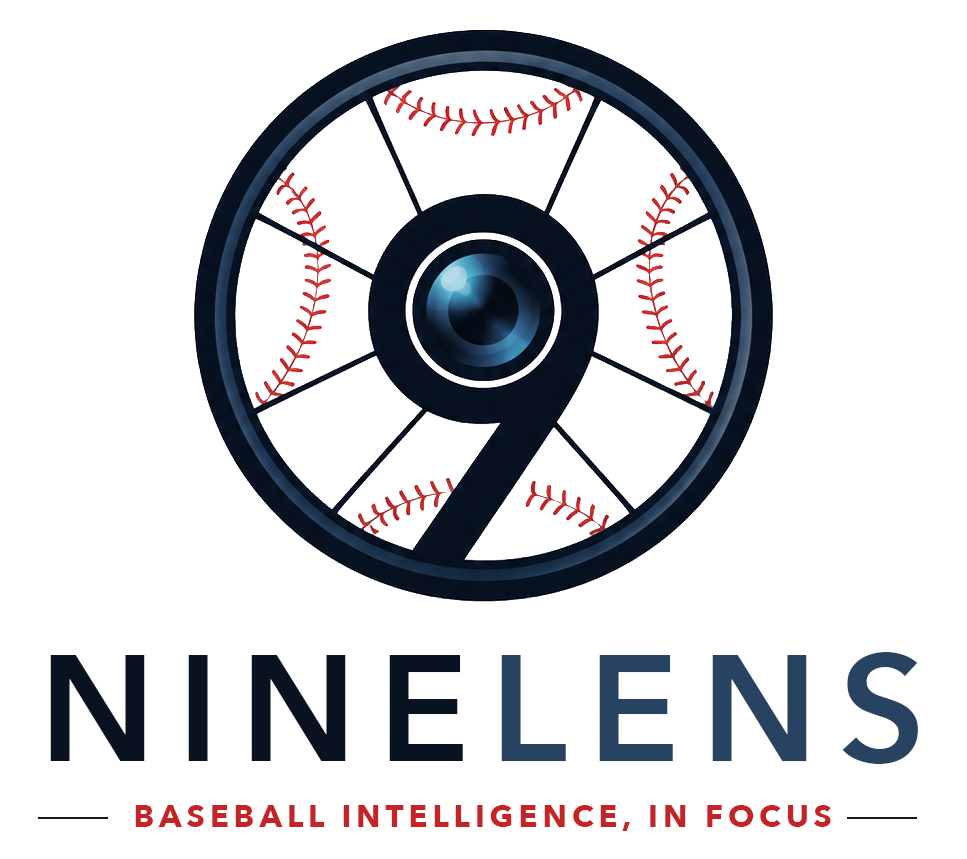
<style>
.page{position:relative;width:967px;height:859px;background:#ffffff}
.page>*{position:absolute;margin:0}
.t1{font:150px "AvenirNext-DemiBold";letter-spacing:0.14em;color:#081220}
.t2{font:150px "AvenirNext-DemiBold";letter-spacing:0.14em;color:#284361}
.t3{font:31px "AvenirNext-Bold";letter-spacing:0.16em;color:#c52427}
</style>
<div class="page">
<p class="t1" style="left:50px;top:652px;width:868px;height:112px">NINE<span class="t2">LENS</span></p>
<p class="t3" style="left:135px;top:805px;width:696px;height:26px">BASEBALL INTELLIGENCE, IN FOCUS</p>
</div>
